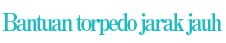
<style>
.page{position:relative;width:226px;height:43px;background:#ffffff}
.page>*{position:absolute;margin:0}
.t1{font:24px "RyuminPro-ExBold";letter-spacing:-0.125em;color:#1dbcc0;scale:0.9 1}
</style>
<div class="page">
<p class="t1" style="left:2px;top:13px;width:220px;height:22px">Bantuan torpedo jarak jauh</p>
</div>
